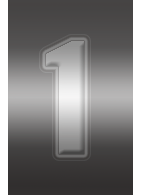
<style>
.page{position:relative;width:142px;height:195px}
.page>*{position:absolute;margin:0}
.t1{font:150px "Krungthep"}
</style>
<div class="page">
<p class="t1" style="left:46px;top:41px;width:38px;height:113px">1</p>
</div>
